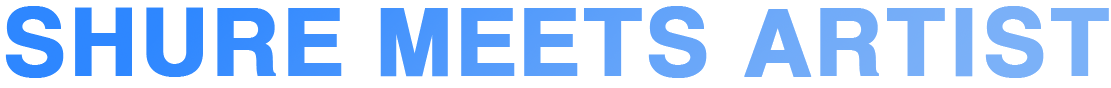
<style>
.page{position:relative;width:1111px;height:88px;background:#ffffff}
.page>*{position:absolute;margin:0}
.t1{font:87.4px "HYgtrE";letter-spacing:-0.025em;font-weight:bold}
</style>
<div class="page">
<p class="t1" style="left:5px;top:6px;width:1104px;height:72px">SHURE MEETS ARTIST</p>
</div>
